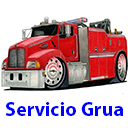
<style>
.page{position:relative;width:128px;height:128px;background:#ffffff}
.page>*{position:absolute;margin:0}
.t1{font:20px "MyriadPro-Bold";color:#0000ff}
</style>
<div class="page">
<p class="t1" style="left:5px;top:102px;width:118px;height:14px">Servicio Grua</p>
</div>
